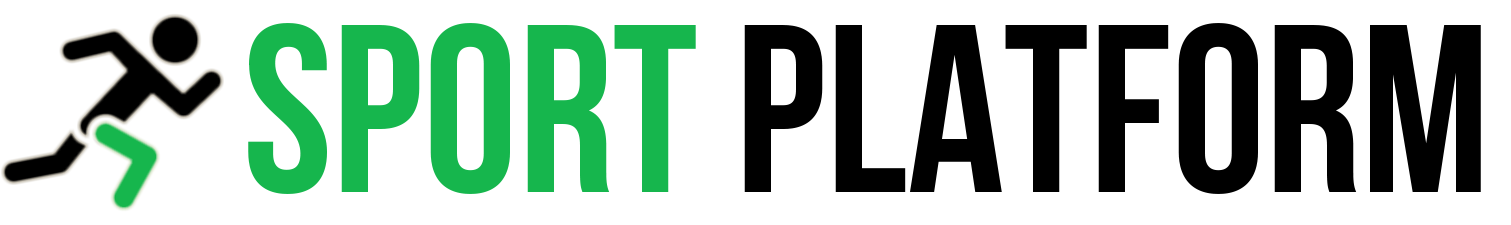
<style>
.page{position:relative;width:1511px;height:225px;background:#ffffff}
.page>*{position:absolute;margin:0}
.t1{font:238.4px "BebasNeueBold";color:#000000}
.t2{font:238.4px "BebasNeueBold";color:#16b64d}
</style>
<div class="page">
<p class="t1" style="left:248px;top:23px;width:1233px;height:171px"><span class="t2">SPORT</span> PLATFORM</p>
</div>
